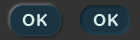
<style>
.page{position:relative;width:140px;height:40px;background:#333333}
.page>*{position:absolute;margin:0}
.t1{font:16.7px "#9Slide03QuicksandBold-Bold";letter-spacing:0.075em;color:#d8ece9;text-transform:uppercase}
</style>
<div class="page">
<p class="t1" style="left:22px;top:14px;width:25px;height:12px">ok</p>
<p class="t1" style="left:93px;top:14px;width:25px;height:12px">ok</p>
</div>
